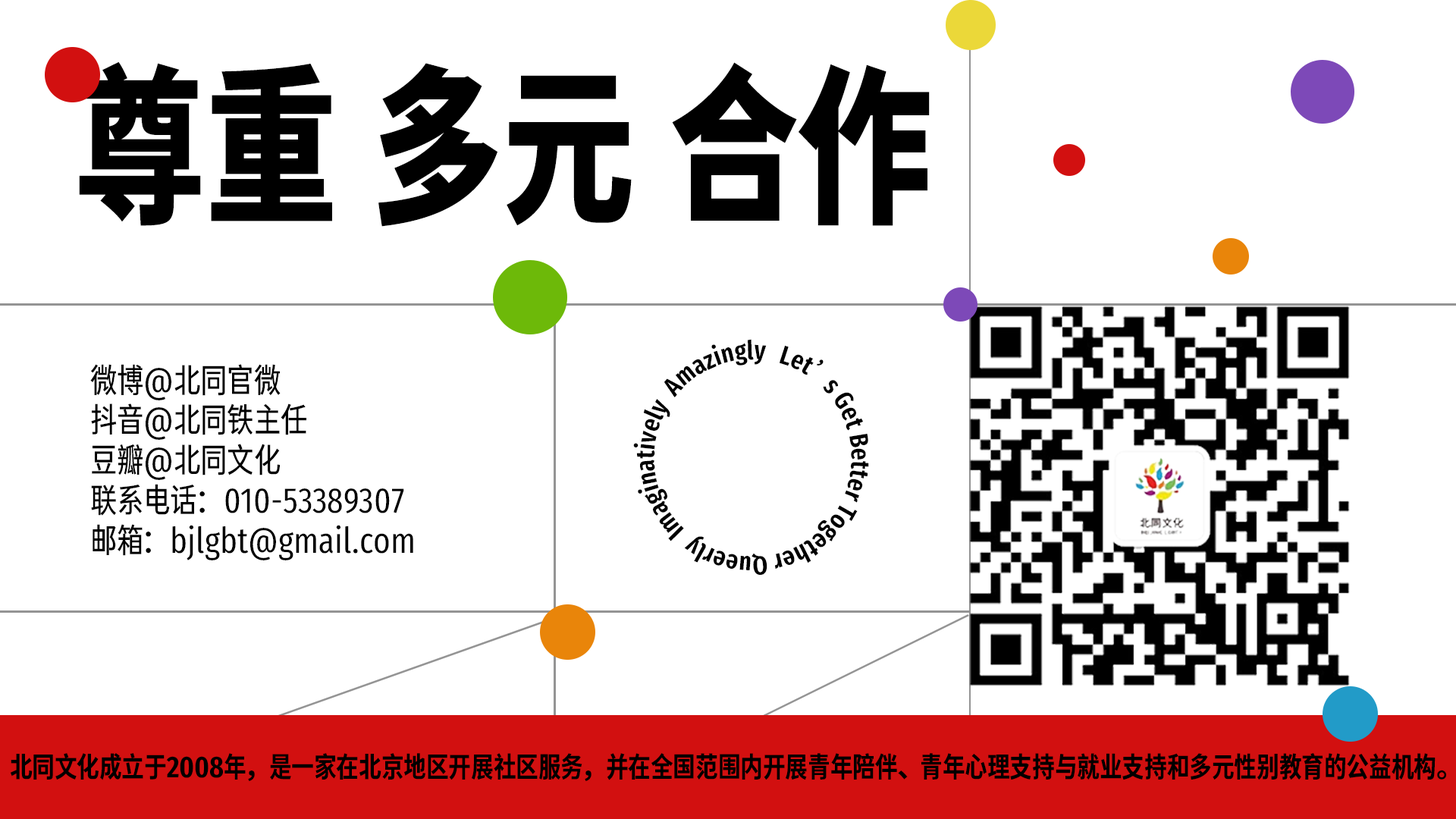
<style>
.page{position:relative;width:1456px;height:819px;background:#ffffff}
.page>*{position:absolute;margin:0}
.t1{font:170.8px "GlowSansSC-Compressed-ExtraBold";color:#000000;scale:0.97 1}
.t2{font:24.5px/51.5px "GlowSansSC-Compressed-Bold";color:#000000}
.t3{font:33.4px "GlowSansSC-Compressed-Book";color:#000000}
.t4{font:28.1px "GlowSansSC-Compressed-Bold";color:#000000}
</style>
<div class="page">
<p class="t1" style="left:79px;top:61px;width:851px;height:166px">尊重 多元 合作</p>
<p class="t2" style="left:633px;top:339px;width:236px;height:236px">Let’s Get Better Together Queerly  Imaginatively  Amazingly</p>
<p class="t3" style="left:90px;top:364px;width:323px;height:196px">微博@北同官微<br>抖音@北同铁主任<br>豆瓣@北同文化<br>联系电话：010-53389307<br>邮箱：bjlgbt@gmail.com</p>
<p class="t4" style="left:10px;top:753px;width:1437px;height:28px">北同文化成立于2008年，是一家在北京地区开展社区服务，并在全国范围内开展青年陪伴、青年心理支持与就业支持和多元性别教育的公益机构。</p>
</div>
